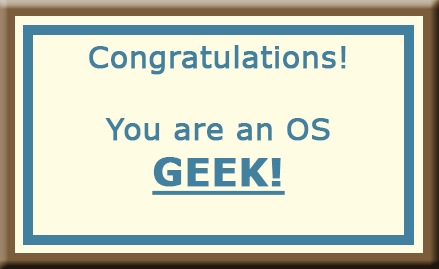
<style>
.page{position:relative;width:439px;height:269px;background:#fefde4}
.page>*{position:absolute;margin:0}
.t1{font:30px "Verdana";color:#41809f;font-weight:bold}
.t2{font:38px "Verdana-Bold";color:#41809f;font-weight:bold;text-decoration:underline}
</style>
<div class="page">
<p class="t1" style="left:89px;top:45px;width:257px;height:150px;text-align:center">Congratulations!<br><br>You are an OS <br><span class="t2">GEEK!</span></p>
</div>
